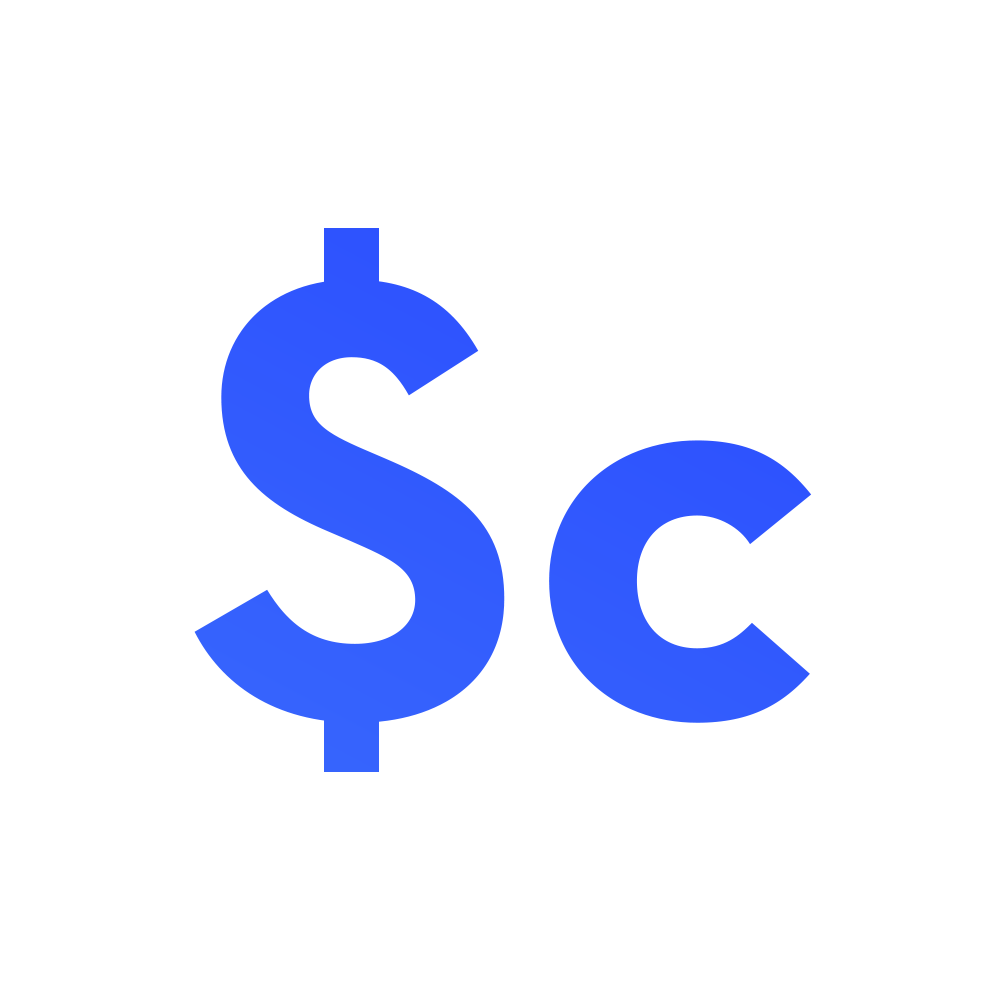
<style>
.page{position:relative;width:1000px;height:1000px;background:#ffffff}
.page>*{position:absolute;margin:0}
.t1{font:635.7px "NeutraText-Bold";letter-spacing:-0.005em;color:#325bfd}
</style>
<div class="page">
<p class="t1" style="left:194px;top:279px;width:618px;height:444px">Sc</p>
</div>
